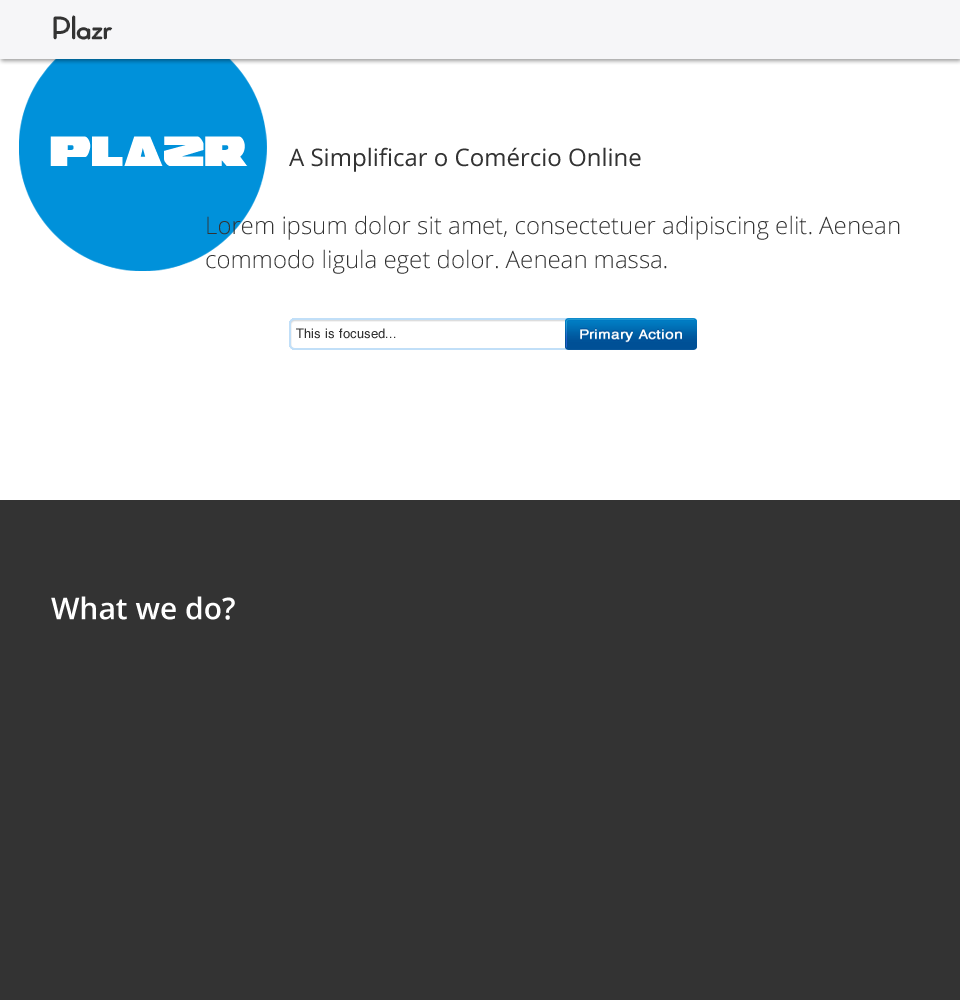
<style>
.page{position:relative;width:960px;height:1000px;background:#333333}
.page>*{position:absolute;margin:0}
.t1{font:30.4px "ADELE-Light";color:#333333;scale:1.18 1}
.t2{font:48px "Guardian";color:#ffffff}
.t3{font:24px "OpenSans";color:#333333}
.t4{font:24px/34px "OpenSans-Light";color:#333333}
.t5{font:30px "OpenSans-Semibold";color:#ffffff}
</style>
<div class="page">
<p class="t1" style="left:54px;top:16px;width:58px;height:23px">Plazr</p>
<p class="t2" style="left:50px;top:136px;width:198px;height:30px">Plazr</p>
<p class="t3" style="left:289px;top:147px;width:352px;height:25px">A Simplificar o Comércio Online</p>
<p class="t4" style="left:206px;top:215px;width:694px;height:59px">Lorem ipsum dolor sit amet, consectetuer adipiscing elit. Aenean commodo ligula eget dolor. Aenean massa.</p>
<p class="t5" style="left:51px;top:596px;width:184px;height:24px">What we do?</p>
</div>
